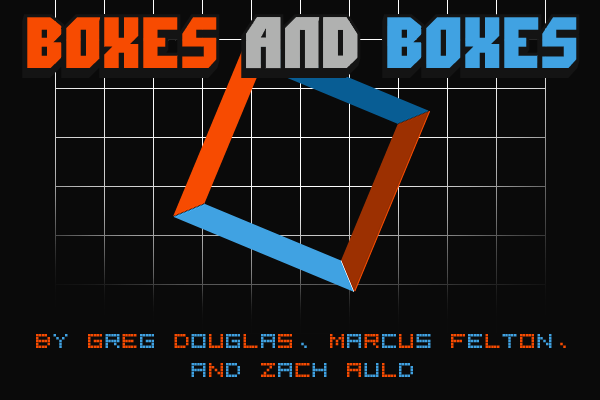
<style>
.page{position:relative;width:600px;height:400px;background:#0a0a0a}
.page>*{position:absolute;margin:0}
.t1{font:24px "LEDDisplay7";color:#f74b01}
.t2{font:24px "LEDDisplay7";color:#40a2e2}
</style>
<div class="page">
<p class="t1" style="left:36px;top:334px;width:530px;height:43px;text-align:center">B<span class="t2">y </span>g<span class="t2">r</span>e<span class="t2">g </span>d<span class="t2">o</span>u<span class="t2">g</span>l<span class="t2">a</span>s<span class="t2">, </span>M<span class="t2">a</span>r<span class="t2">c</span>u<span class="t2">s </span>F<span class="t2">e</span>l<span class="t2">t</span>o<span class="t2">n</span>,<br><span class="t2">a</span>n<span class="t2">d </span>Z<span class="t2">a</span>c<span class="t2">h </span>A<span class="t2">u</span>l<span class="t2">d</span></p>
</div>
